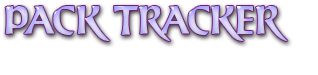
<style>
.page{position:relative;width:318px;height:75px;background:#ffffff}
.page>*{position:absolute;margin:0}
.t1{font:40px "LHFUncialCaps";color:#c8c6f5}
</style>
<div class="page">
<p class="t1" style="left:5px;top:6px;width:283px;height:35px">PACK TRACKER</p>
</div>
